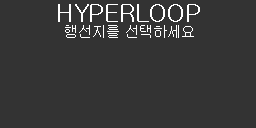
<style>
.page{position:relative;width:256px;height:128px;background:#333333}
.page>*{position:absolute;margin:0}
.t1{font:24px "Gulim";color:#ffffff}
.t2{font:14px "Gulim";color:#ffffff}
</style>
<div class="page">
<p class="t1" style="left:58px;top:4px;width:142px;height:18px">HYPERLOOP</p>
<p class="t2" style="left:65px;top:25px;width:129px;height:13px">행선지를 선택하세요</p>
</div>
